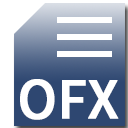
<style>
.page{position:relative;width:128px;height:128px;background:#ffffff}
.page>*{position:absolute;margin:0}
.t1{font:51px "NotoSansTC-Medium";color:#ffffff;font-weight:bold}
</style>
<div class="page">
<p class="t1" style="left:20px;top:79px;width:99px;height:41px">OFX</p>
</div>
